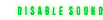
<style>
.page{position:relative;width:103px;height:20px;background:#ffffff}
.page>*{position:absolute;margin:0}
.t1{font:12px "Sunzoomspark";color:#00d03b}
</style>
<div class="page">
<p class="t1" style="left:18px;top:6px;width:85px;height:10px">D I S A B L E  S O U N D</p>
</div>
